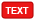
<style>
.page{position:relative;width:35px;height:20px;background:#eb1616}
.page>*{position:absolute;margin:0}
.t1{font:9px "Arial-BoldMT";color:#ffffff;text-transform:uppercase}
</style>
<div class="page">
<p class="t1" style="left:5px;top:7px;width:24px;height:7px">text</p>
</div>
